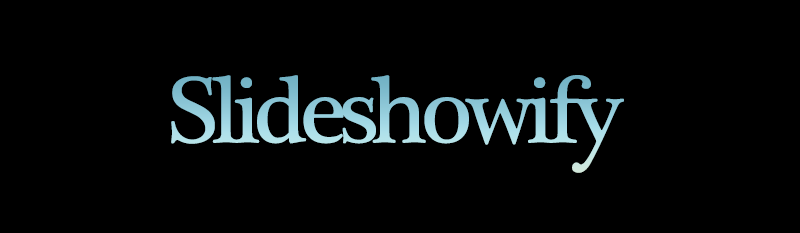
<style>
.page{position:relative;width:800px;height:233px;background:#000000}
.page>*{position:absolute;margin:0}
.t1{font:96.4px "PlantagenetCherokee";letter-spacing:-0.075em}
</style>
<div class="page">
<p class="t1" style="left:171px;top:75px;width:453px;height:98px">Slideshowify</p>
</div>
